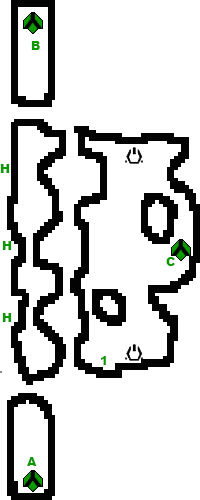
<style>
.page{position:relative;width:200px;height:500px;background:#ffffff}
.page>*{position:absolute;margin:0}
.t1{font:12px "Arial-Black";color:#0c9801}
</style>
<div class="page">
<p class="t1" style="left:31px;top:41px;width:9px;height:9px">B</p>
<p class="t1" style="left:0px;top:164px;width:10px;height:9px">H</p>
<p class="t1" style="left:2px;top:241px;width:10px;height:9px">H</p>
<p class="t1" style="left:166px;top:257px;width:9px;height:9px">C</p>
<p class="t1" style="left:2px;top:313px;width:10px;height:9px">H</p>
<p class="t1" style="left:101px;top:356px;width:5px;height:9px">1</p>
<p class="t1" style="left:27px;top:457px;width:10px;height:9px">A</p>
</div>
